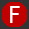
<style>
.page{position:relative;width:29px;height:29px;background:#c10000}
.page>*{position:absolute;margin:0}
.t1{font:22.6px "LucidaSans";color:#ffffff}
</style>
<div class="page">
<p class="t1" style="left:10px;top:6px;width:10px;height:17px">F</p>
</div>
